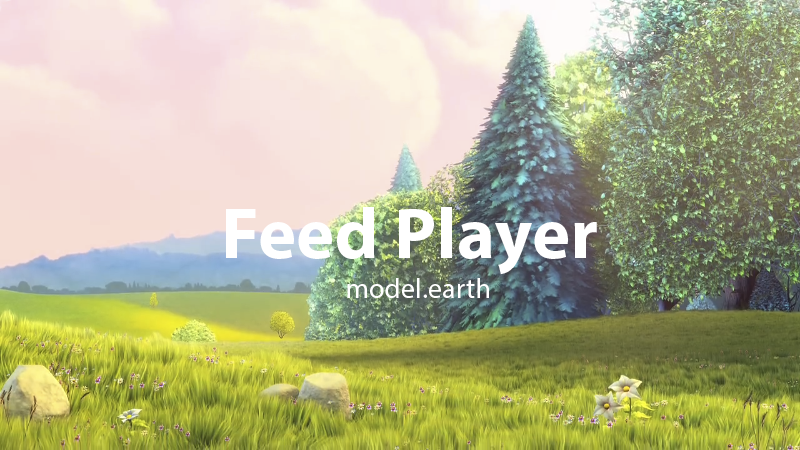
<style>
.page{position:relative;width:800px;height:450px}
.page>*{position:absolute;margin:0}
.t1{font:72px "MyriadPro-Bold";letter-spacing:0.01em;color:#ffffff}
.t2{font:28.1px "MyriadPro-Regular";letter-spacing:0.01em;color:#ffffff}
</style>
<div class="page">
<p class="t1" style="left:226px;top:207px;width:371px;height:68px">Feed Player</p>
<p class="t2" style="left:347px;top:278px;width:142px;height:20px">model.earth</p>
</div>
